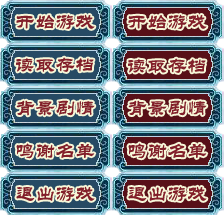
<style>
.page{position:relative;width:224px;height:215px}
.page>*{position:absolute;margin:0}
.t1{font:20px "STLiti";color:#821f2a}
</style>
<div class="page">
<p class="t1" style="left:16px;top:14px;width:79px;height:15px">开始游戏</p>
<p class="t1" style="left:128px;top:14px;width:79px;height:15px">开始游戏</p>
<p class="t1" style="left:16px;top:57px;width:78px;height:15px">读取存档</p>
<p class="t1" style="left:128px;top:58px;width:78px;height:15px">读取存档</p>
<p class="t1" style="left:16px;top:100px;width:79px;height:16px">背景剧情</p>
<p class="t1" style="left:128px;top:100px;width:79px;height:16px">背景剧情</p>
<p class="t1" style="left:16px;top:143px;width:79px;height:16px">鸣谢名单</p>
<p class="t1" style="left:128px;top:143px;width:79px;height:16px">鸣谢名单</p>
<p class="t1" style="left:16px;top:186px;width:79px;height:15px">退出游戏</p>
<p class="t1" style="left:128px;top:186px;width:79px;height:15px">退出游戏</p>
</div>
